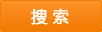
<style>
.page{position:relative;width:102px;height:32px}
.page>*{position:absolute;margin:0}
.t1{font:16px "MicrosoftYaHei";color:#ffffff;font-weight:bold}
</style>
<div class="page">
<p class="t1" style="left:31px;top:8px;width:38px;height:17px">搜 索</p>
</div>
